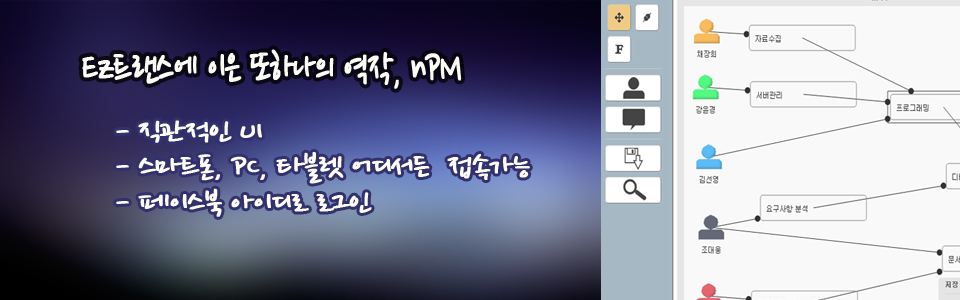
<style>
.page{position:relative;width:960px;height:300px;background:#f9f9f9}
.page>*{position:absolute;margin:0}
.t1{font:47.8px "NanumPen";letter-spacing:-0.05em;color:#fcfcf5;font-weight:bold;scale:0.78 1}
.t2{font:31.4px/35.9px "NanumPen";letter-spacing:-0.05em;color:#fcfcf5;font-weight:bold;scale:1.21 1}
</style>
<div class="page">
<p class="t1" style="left:82px;top:49px;width:380px;height:40px">Ez트랜스에 이은 또하나의 역작, nPM</p>
<p class="t2" style="left:116px;top:120px;width:414px;height:97px">- 직관적인 UI<br>- 스마트폰, PC, 타블렛 어디서든  접속가능<br>- 페이스북 아이디로 로그인</p>
</div>
